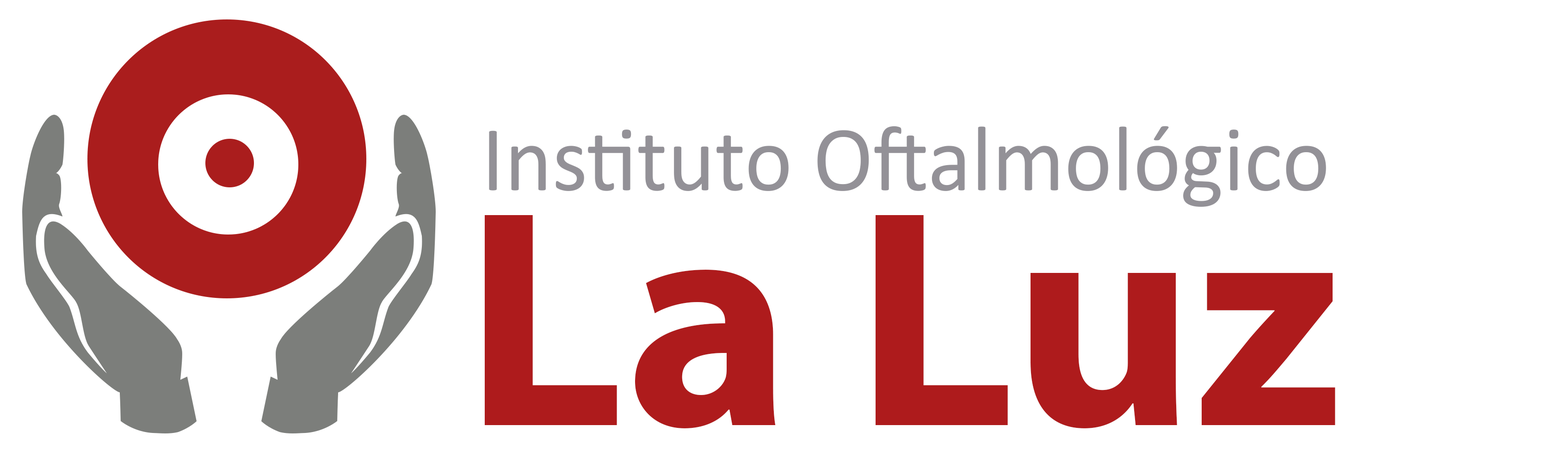
<style>
.page{position:relative;width:1568px;height:451px;background:#ffffff}
.page>*{position:absolute;margin:0}
.t1{font:93.6px "Calibri";color:#939197;scale:0.97 1}
.t2{font:311.6px "MyriadPro-Bold";color:#ae1b1c}
</style>
<div class="page">
<p class="t1" style="left:489px;top:126px;width:837px;height:81px">Instituto Oftalmológico</p>
<p class="t2" style="left:485px;top:215px;width:850px;height:213px">La Luz</p>
</div>
